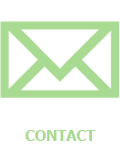
<style>
.page{position:relative;width:120px;height:150px;background:#ffffff}
.page>*{position:absolute;margin:0}
.t1{font:14.6px "Tahoma-Bold";color:#a9da92}
</style>
<div class="page">
<p class="t1" style="left:25px;top:130px;width:71px;height:11px">CONTACT</p>
</div>
